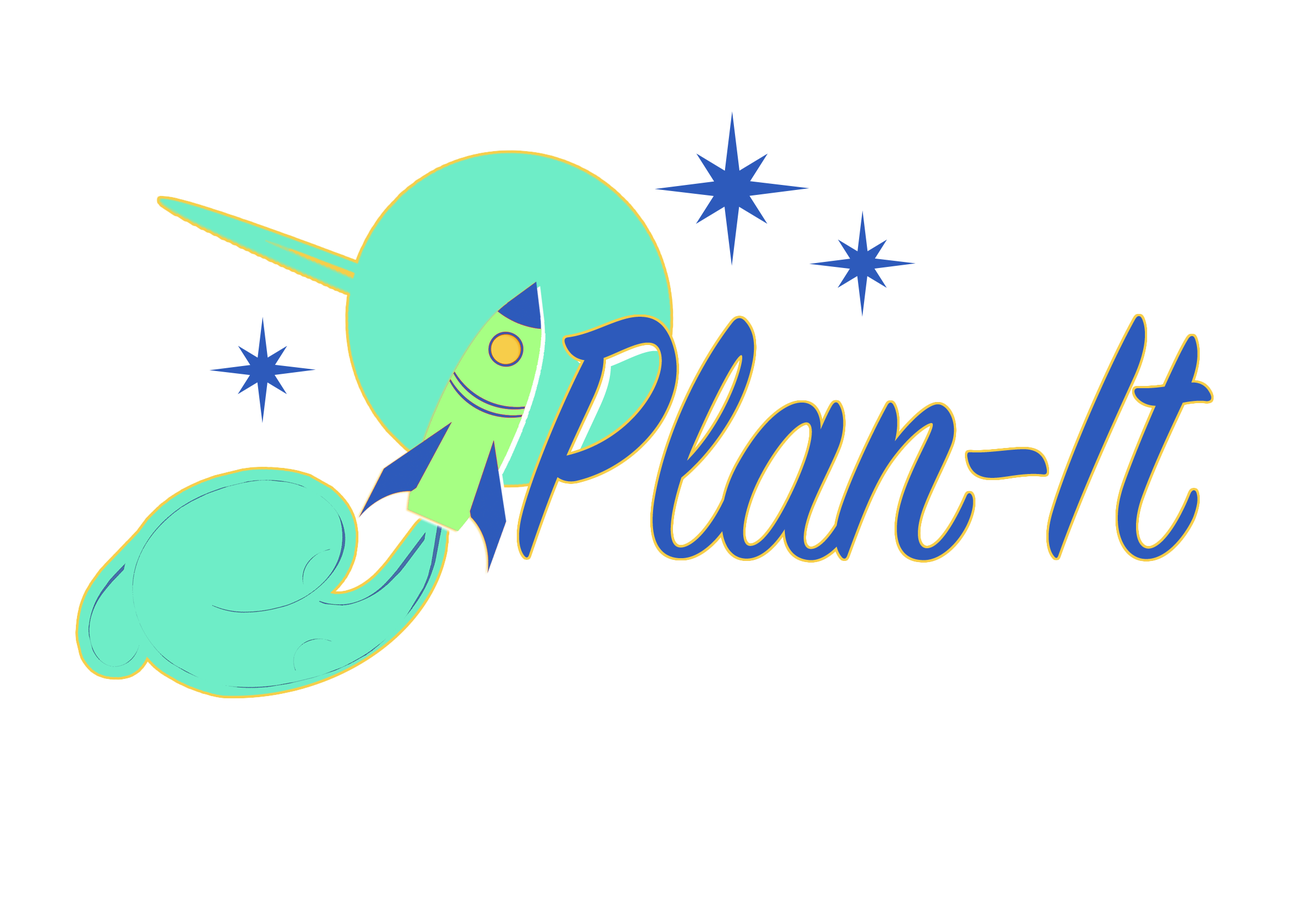
<style>
.page{position:relative;width:1300px;height:917px;background:#ffffff}
.page>*{position:absolute;margin:0}
.t1{font:379.4px "SignPainter-HouseScript";color:#2d5abb;scale:0.8 1}
</style>
<div class="page">
<p class="t1" style="left:519px;top:316px;width:692px;height:245px">Plan-It</p>
</div>
